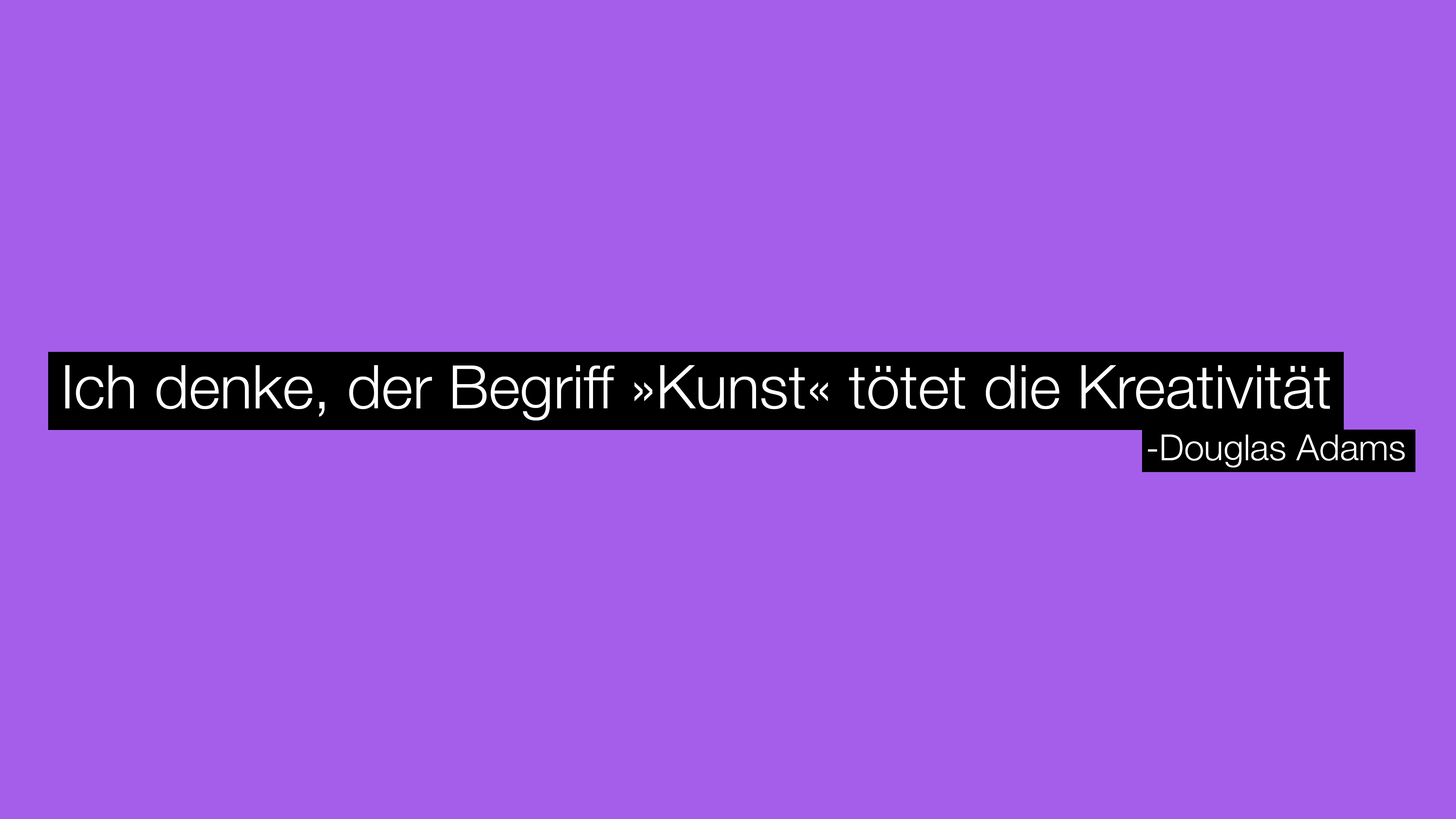
<style>
.page{position:relative;width:1456px;height:819px;background:#a55eea}
.page>*{position:absolute;margin:0}
.t1{font:60.2px "HelveticaNeue-Light";color:#ffffff}
.t2{font:36.1px "HelveticaNeue-Light";color:#ffffff}
</style>
<div class="page">
<p class="t1" style="left:65px;top:365px;width:1265px;height:55px">Ich denke, der Begriff »Kunst« tötet die Kreativität</p>
<p class="t2" style="left:1148px;top:435px;width:257px;height:33px">-Douglas Adams</p>
</div>
